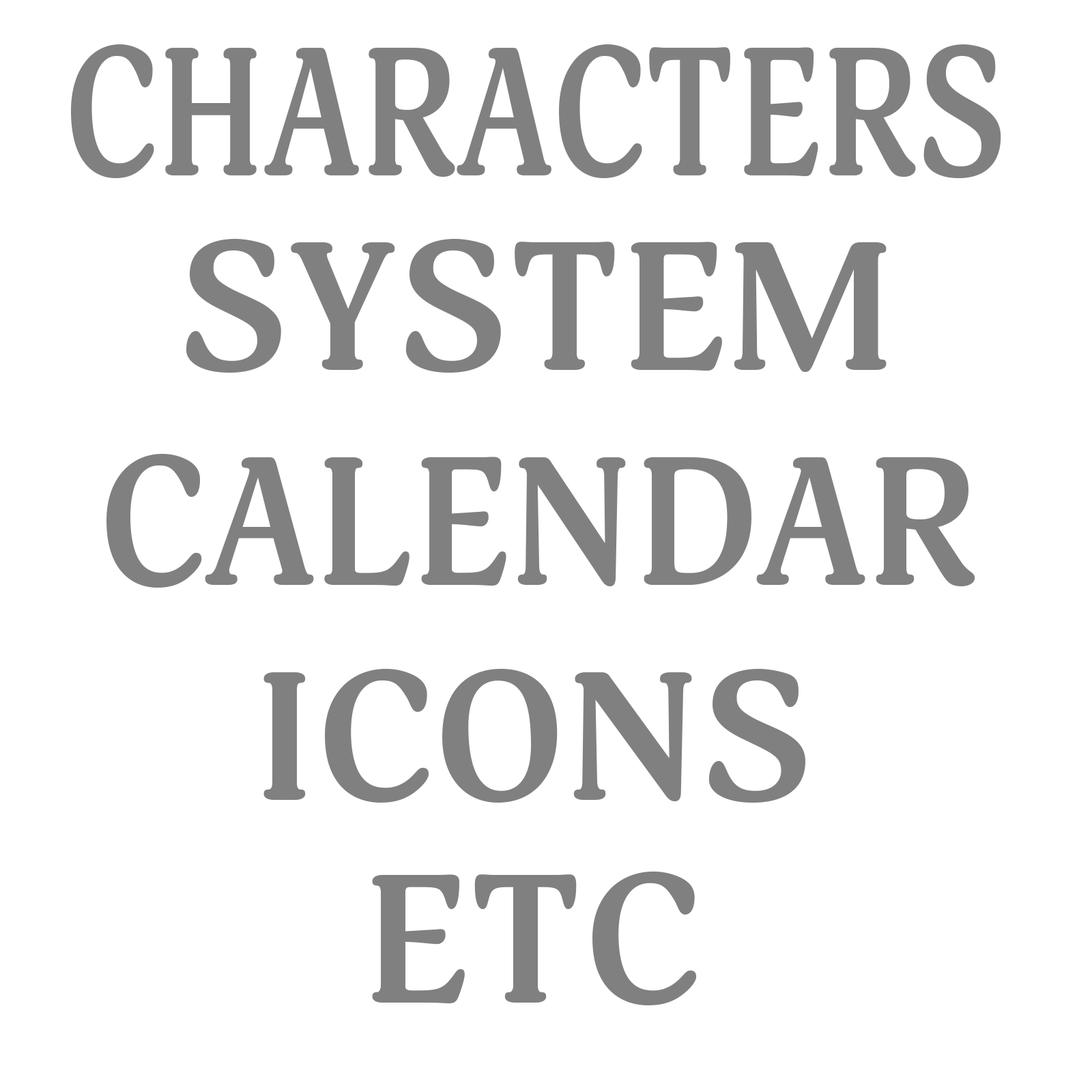
<style>
.page{position:relative;width:1092px;height:1092px;background:#ffffff}
.page>*{position:absolute;margin:0}
.t1{font:180.5px "Adonis-Bold";color:#808080;scale:0.82 1}
.t2{font:180.5px "Adonis-Bold";color:#808080}
.t3{font:180.5px "Adonis-Bold";color:#808080;scale:0.94 1}
</style>
<div class="page">
<p class="t1" style="left:71px;top:44px;width:930px;height:134px">CHARACTERS</p>
<p class="t2" style="left:186px;top:238px;width:701px;height:135px">SYSTEM</p>
<p class="t3" style="left:106px;top:453px;width:869px;height:135px">CALENDAR</p>
<p class="t2" style="left:263px;top:668px;width:542px;height:135px">ICONS</p>
<p class="t2" style="left:372px;top:871px;width:325px;height:134px">ETC</p>
</div>
